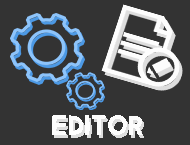
<style>
.page{position:relative;width:190px;height:145px;background:#333333}
.page>*{position:absolute;margin:0}
.t1{font:27.1px "Bizon";color:#fdfdfd;font-weight:bold}
</style>
<div class="page">
<p class="t1" style="left:52px;top:115px;width:90px;height:20px">EDITOR</p>
</div>
